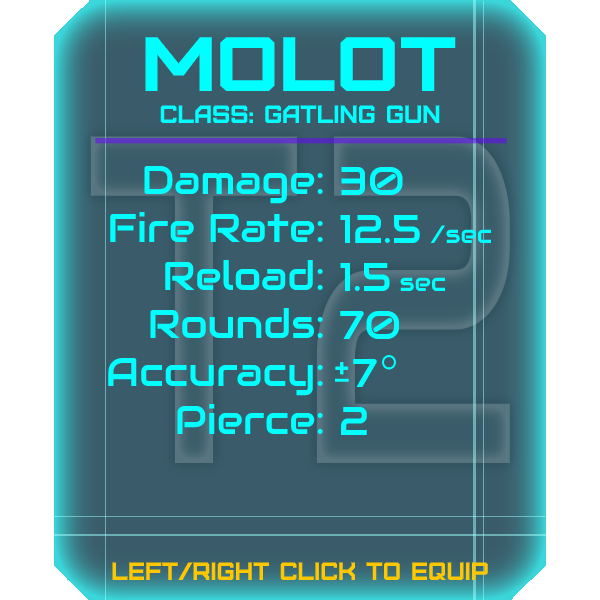
<style>
.page{position:relative;width:600px;height:600px;background:#3a5c6a}
.page>*{position:absolute;margin:0}
.t1{font:76.8px "Furore";color:#00ffff;scale:1.13 1}
.t2{font:25px "Furore";color:#00ffff}
.t3{font:40px "Audiowide-Regular";color:#00ffff}
.t4{font:25px "Audiowide-Regular";color:#00ffff}
.t5{font:25px "Furore";color:#ffc700}
</style>
<div class="page">
<p class="t1" style="left:145px;top:37px;width:311px;height:54px">molot</p>
<p class="t2" style="left:160px;top:105px;width:280px;height:18px">Class: gatling gun</p>
<p class="t3" style="left:108px;top:165px;width:215px;height:269px;text-align:right">Damage:<br>Fire Rate:<br>Reload:<br>Rounds:<br>Accuracy:<br>Pierce:</p>
<p class="t3" style="left:340px;top:166px;width:152px;height:269px">30<br>12.5 <span class="t4">/sec<br></span>1.5 <span class="t4">sec<br></span>70<br> 7<br>2</p>
<p class="t5" style="left:112px;top:562px;width:376px;height:18px">left/right click to equip</p>
</div>
